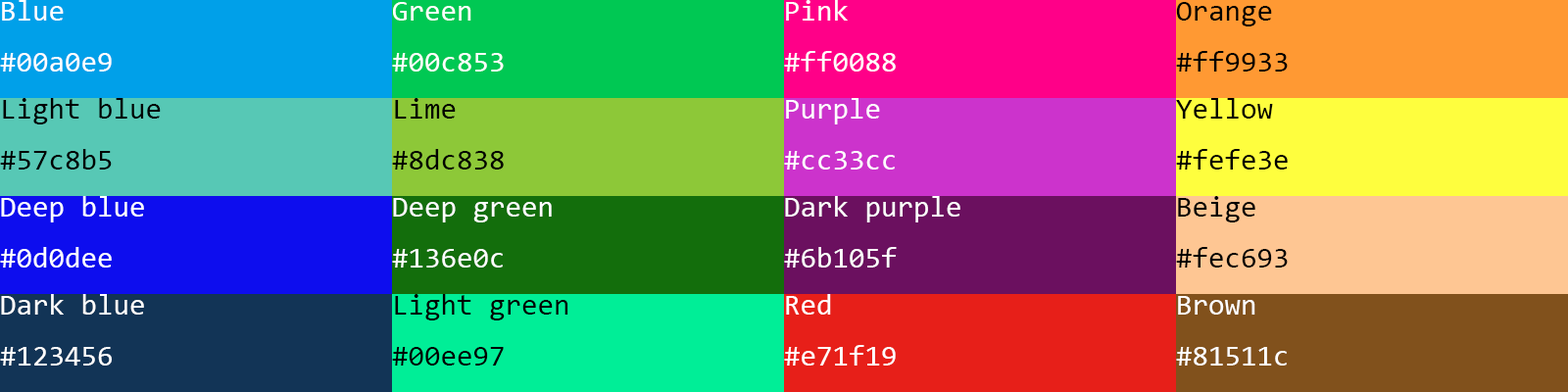
<style>
.page{position:relative;width:1568px;height:392px}
.page>*{position:absolute;margin:0}
.t1{font:29.4px "Consolas";color:#ffffff}
.t2{font:29.4px "Consolas";color:#000000}
</style>
<div class="page">
<p class="t1" style="left:0px;top:0px;width:112px;height:72px">Blue<br>#00a0e9</p>
<p class="t1" style="left:392px;top:2px;width:112px;height:70px">Green<br>#00c853</p>
<p class="t1" style="left:784px;top:0px;width:112px;height:72px">Pink<br>#ff0088</p>
<p class="t2" style="left:1176px;top:2px;width:112px;height:70px">Orange<br>#ff9933</p>
<p class="t2" style="left:0px;top:98px;width:161px;height:72px">Light blue<br>#57c8b5</p>
<p class="t2" style="left:392px;top:98px;width:112px;height:72px">Lime<br>#8dc838</p>
<p class="t1" style="left:784px;top:98px;width:111px;height:72px">Purple<br>#cc33cc</p>
<p class="t2" style="left:1176px;top:98px;width:112px;height:72px">Yellow<br>#fefe3e</p>
<p class="t1" style="left:0px;top:196px;width:144px;height:72px">Deep blue<br>#0d0dee</p>
<p class="t1" style="left:392px;top:198px;width:160px;height:70px">Deep green<br>#136e0c</p>
<p class="t1" style="left:784px;top:196px;width:176px;height:72px">Dark purple<br>#6b105f</p>
<p class="t2" style="left:1176px;top:196px;width:112px;height:72px">Beige<br>#fec693</p>
<p class="t1" style="left:0px;top:294px;width:144px;height:72px">Dark blue<br>#123456</p>
<p class="t2" style="left:392px;top:294px;width:176px;height:72px">Light green<br>#00ee97</p>
<p class="t1" style="left:784px;top:294px;width:112px;height:72px">Red<br>#e71f19</p>
<p class="t1" style="left:1176px;top:296px;width:111px;height:70px">Brown<br>#81511c</p>
</div>
